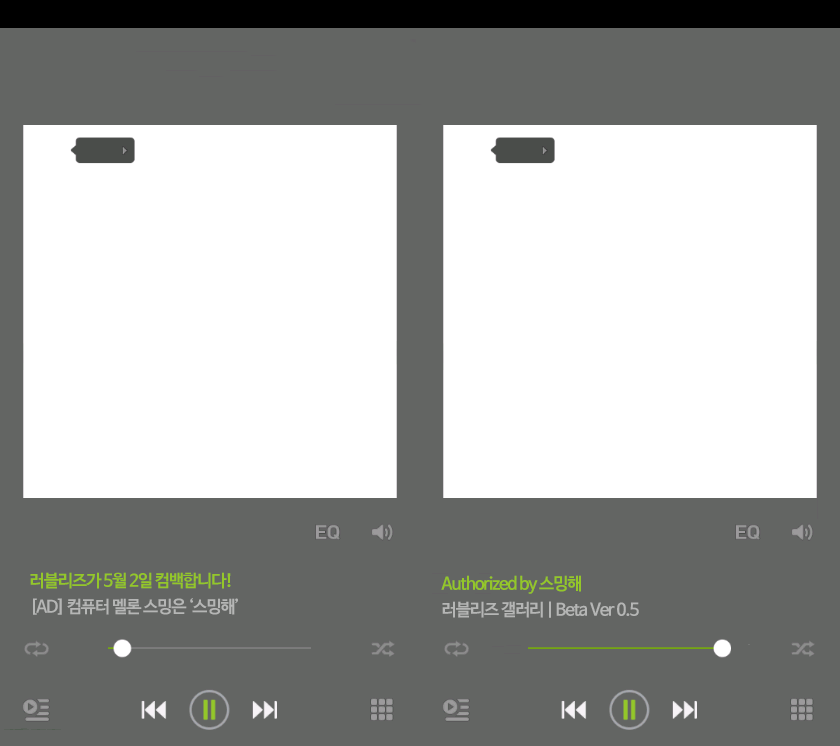
<style>
.page{position:relative;width:840px;height:746px;background:#636563}
.page>*{position:absolute;margin:0}
.t1{font:17px/26px "NanumBarunGothicBold";letter-spacing:-0.06em;color:#b5b6b5}
.t2{font:17px/26px "NanumBarunGothicBold";letter-spacing:-0.06em;color:#94c729}
</style>
<div class="page">
<p class="t1" style="left:30px;top:572px;width:208px;height:43px"><span class="t2">러블리즈가 5월 2일 컴백합니다!<br></span>[AD] 컴퓨터 멜론 스밍은 ‘스밍해’</p>
<p class="t1" style="left:441px;top:575px;width:198px;height:43px"><span class="t2">Authorized by 스밍해<br></span>러블리즈 갤러리 | Beta Ver 0.5</p>
</div>
